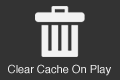
<style>
.page{position:relative;width:120px;height:80px;background:#333333}
.page>*{position:absolute;margin:0}
.t1{font:11px "Helvetica";color:#f2f2f2}
</style>
<div class="page">
<p class="t1" style="left:8px;top:64px;width:103px;height:12px">Clear Cache On Play</p>
</div>
